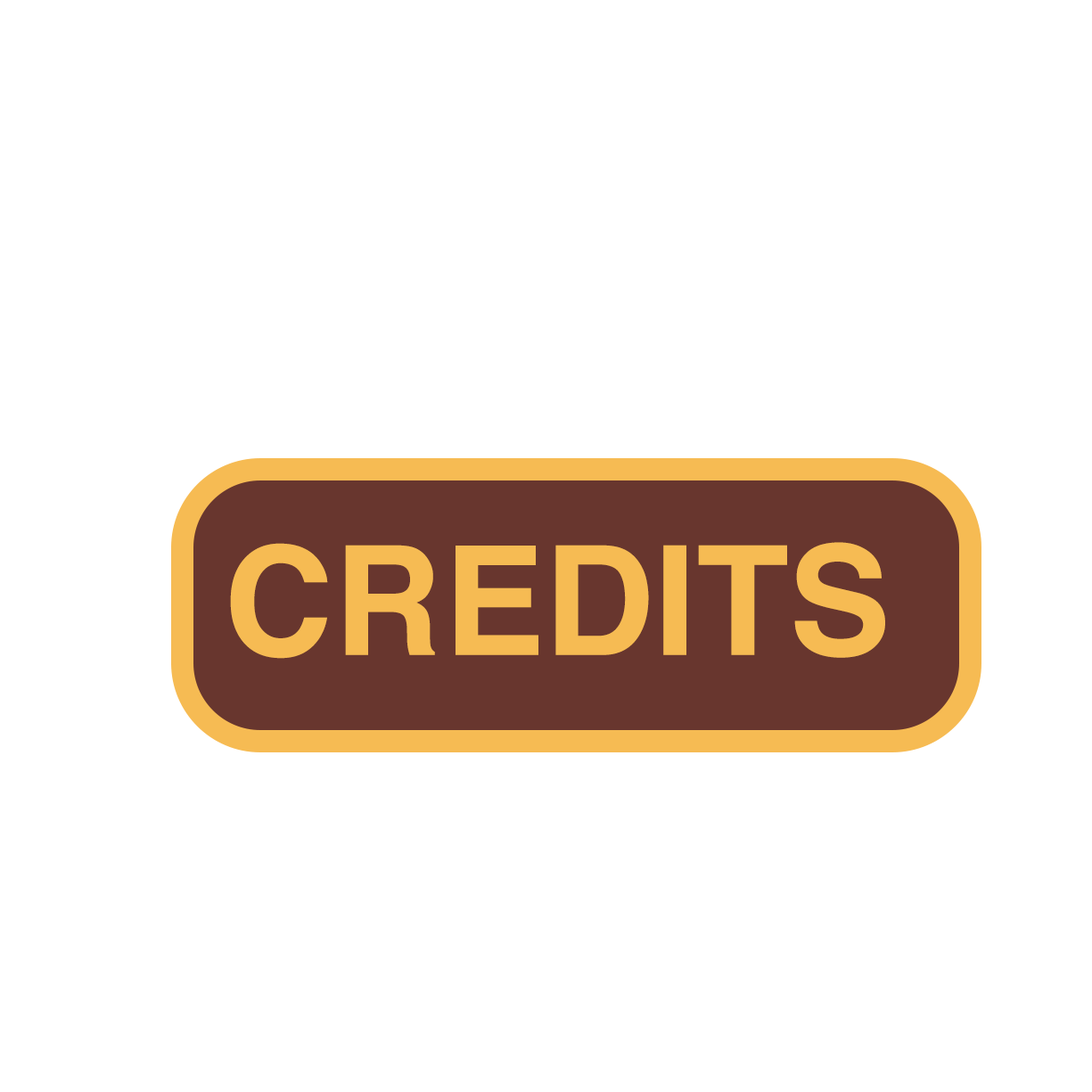
<style>
.page{position:relative;width:1092px;height:1092px;background:#ffffff}
.page>*{position:absolute;margin:0}
.t1{font:151.7px "Helvetica-Bold";color:#f6bb53}
</style>
<div class="page">
<p class="t1" style="left:230px;top:542px;width:655px;height:117px">CREDITS</p>
</div>
